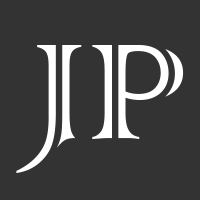
<style>
.page{position:relative;width:200px;height:200px;background:#333333}
.page>*{position:absolute;margin:0}
.t1{font:179.7px "ColonnaMT";color:#ffffff}
</style>
<div class="page">
<p class="t1" style="left:16px;top:45px;width:168px;height:128px">JP</p>
</div>
